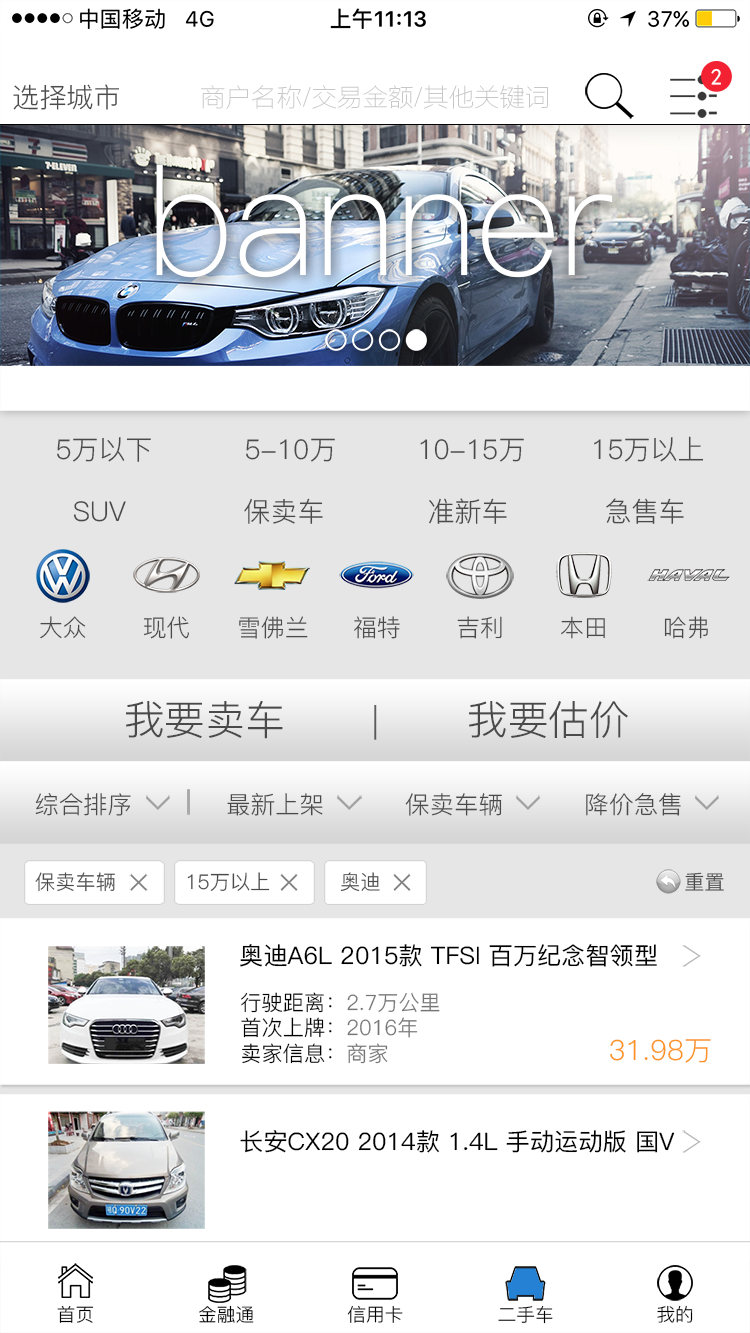
<style>
.page{position:relative;width:750px;height:1333px;background:#ffffff}
.page>*{position:absolute;margin:0}
.t1{font:22.8px "SimHei";color:#ffffff}
.t2{font:27.2px "PingFang-SC-Regular";color:#4c4c4c}
.t3{font:25.5px "FZLTCXHJW--GB1-0";color:#c7c7c7}
.t4{font:151.9px "PingFang-SC-Light";color:#ffffff}
.t5{font:27.2px "PingFang-SC-Regular";color:#4a4a4a}
.t6{font:23.8px "PingFang-SC-Regular";color:#4a4a4a}
.t7{font:40.5px "PingFang-SC-Regular";color:#4a4a4a}
.t8{font:38.2px "PingFang-SC-Regular";color:#5b5b5b}
.t9{font:24.1px "PingFang-SC-Regular";color:#4a4a4a}
.t10{font:20.1px "PingFang-SC-Regular";color:#4a4a4a}
.t11{font:24.1px "PingFang-SC-Medium";color:#000000}
.t12{font:21.1px "PingFang-SC-Regular";color:#767676}
.t13{font:21.1px "PingFang-SC-Regular";color:#000000}
.t14{font:27.9px "PingFang-SC-Regular";color:#fc9323}
.t15{font:18.4px "PingFang-SC-Regular";color:#000000}
</style>
<div class="page">
<p class="t1" style="left:711px;top:68px;width:10px;height:17px">2</p>
<p class="t2" style="left:13px;top:84px;width:106px;height:26px">选择城市</p>
<p class="t3" style="left:201px;top:85px;width:347px;height:24px">商户名称/交易金额/其他关键词</p>
<p class="t4" style="left:156px;top:164px;width:457px;height:114px">banner</p>
<p class="t5" style="left:57px;top:437px;width:94px;height:25px">5万以下</p>
<p class="t5" style="left:246px;top:438px;width:89px;height:24px">5-10万</p>
<p class="t5" style="left:420px;top:438px;width:104px;height:24px">10-15万</p>
<p class="t5" style="left:594px;top:436px;width:110px;height:26px">15万以上</p>
<p class="t5" style="left:73px;top:501px;width:53px;height:21px">SUV</p>
<p class="t5" style="left:244px;top:498px;width:79px;height:26px">保卖车</p>
<p class="t5" style="left:429px;top:498px;width:78px;height:26px">准新车</p>
<p class="t5" style="left:606px;top:498px;width:78px;height:26px">急售车</p>
<p class="t6" style="left:40px;top:616px;width:46px;height:23px">大众</p>
<p class="t6" style="left:144px;top:616px;width:45px;height:23px">现代</p>
<p class="t6" style="left:239px;top:616px;width:69px;height:23px">雪佛兰</p>
<p class="t6" style="left:354px;top:616px;width:46px;height:23px">福特</p>
<p class="t6" style="left:457px;top:616px;width:45px;height:23px">吉利</p>
<p class="t6" style="left:561px;top:616px;width:44px;height:23px">本田</p>
<p class="t6" style="left:664px;top:616px;width:44px;height:23px">哈弗</p>
<p class="t7" style="left:126px;top:700px;width:157px;height:39px">我要卖车</p>
<p class="t7" style="left:469px;top:701px;width:159px;height:37px">我要估价</p>
<p class="t8" style="left:374px;top:705px;width:3px;height:35px">丨</p>
<p class="t9" style="left:35px;top:793px;width:96px;height:23px">综合排序</p>
<p class="t9" style="left:227px;top:793px;width:96px;height:23px">最新上架</p>
<p class="t9" style="left:405px;top:793px;width:97px;height:23px">保卖车辆</p>
<p class="t9" style="left:586px;top:793px;width:95px;height:23px">降价急售</p>
<p class="t10" style="left:35px;top:872px;width:80px;height:20px">保卖车辆</p>
<p class="t10" style="left:187px;top:872px;width:83px;height:19px">15万以上</p>
<p class="t10" style="left:340px;top:872px;width:40px;height:20px">奥迪</p>
<p class="t10" style="left:685px;top:872px;width:39px;height:19px">重置</p>
<p class="t11" style="left:240px;top:944px;width:417px;height:23px">奥迪A6L 2015款 TFSI 百万纪念智领型</p>
<p class="t12" style="left:241px;top:992px;width:199px;height:72px"><span class="t13">行驶距离：</span>2.7万公里<br><span class="t13">首次上牌：</span>2016年<br><span class="t13">卖家信息：</span>商家</p>
<p class="t14" style="left:610px;top:1039px;width:101px;height:24px">31.98万</p>
<p class="t11" style="left:240px;top:1130px;width:435px;height:23px">长安CX20 2014款 1.4L 手动运动版 国V</p>
<p class="t15" style="left:57px;top:1305px;width:37px;height:18px">首页</p>
<p class="t15" style="left:199px;top:1305px;width:55px;height:18px">金融通</p>
<p class="t15" style="left:347px;top:1305px;width:56px;height:18px">信用卡</p>
<p class="t15" style="left:498px;top:1305px;width:55px;height:19px">二手车</p>
<p class="t15" style="left:657px;top:1305px;width:36px;height:18px">我的</p>
</div>
